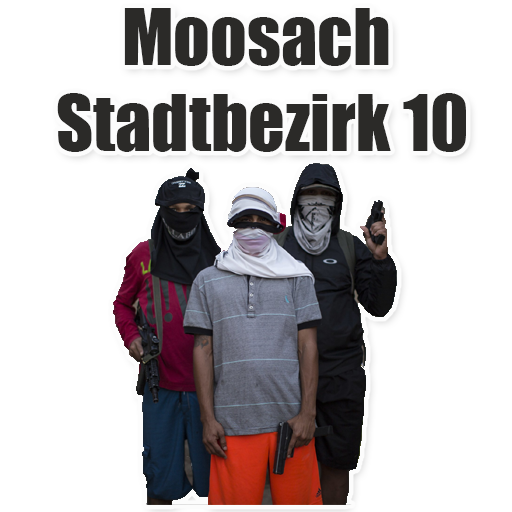
<style>
.page{position:relative;width:512px;height:512px;background:#ffffff}
.page>*{position:absolute;margin:0}
.t1{font:72px "Impact";color:#2b2a28}
</style>
<div class="page">
<p class="t1" style="left:57px;top:8px;width:409px;height:144px;text-align:center">Moosach<br> Stadtbezirk 10</p>
</div>
